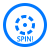
<style>
.page{position:relative;width:50px;height:50px;background:#ffffff}
.page>*{position:absolute;margin:0}
.t1{font:7px "SegoeUI";color:#0082ff}
</style>
<div class="page">
<p class="t1" style="left:17px;top:36px;width:17px;height:6px">SPIN!</p>
</div>
